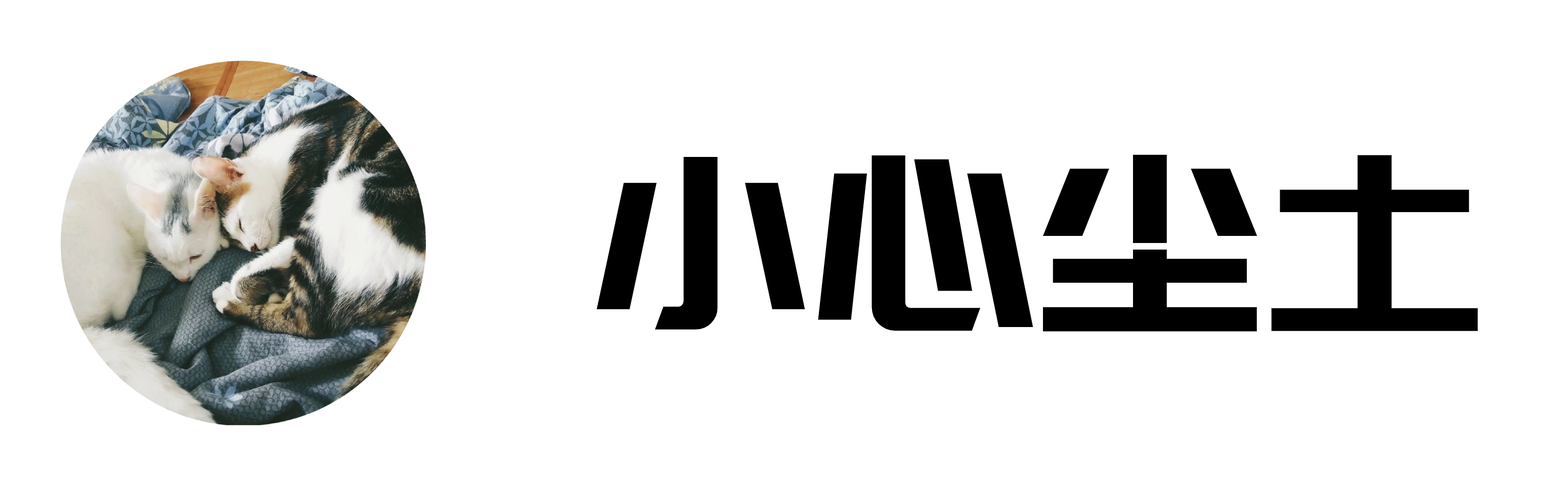
<style>
.page{position:relative;width:1568px;height:486px;background:#ffffff}
.page>*{position:absolute;margin:0}
.t1{font:244.1px "PangMenZhengDao";color:#000000}
</style>
<div class="page">
<p class="t1" style="left:596px;top:154px;width:882px;height:177px">小心尘土</p>
</div>
